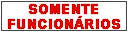
<style>
.page{position:relative;width:128px;height:32px;background:#ffffff}
.page>*{position:absolute;margin:0}
.t1{font:14.2px/15px "Arial-BoldMT";letter-spacing:-0.06em;font-weight:bold;scale:0.91 1}
.t2{font:14.2px/15px "Arial-BoldMT";letter-spacing:-0.02em;font-weight:bold;scale:0.91 1}
.t3{font:14.2px/15px "Arial-BoldMT";letter-spacing:-0.12em;font-weight:bold;scale:0.91 1}
.t4{font:14.2px/15px "Arial-BoldMT";letter-spacing:-0.14em;font-weight:bold;scale:0.91 1}
.t5{font:14.2px/15px "Arial-BoldMT";letter-spacing:-0.16em;font-weight:bold;scale:0.91 1}
.t6{font:14.2px/15px "Arial-BoldMT";letter-spacing:0.06em;font-weight:bold;scale:0.91 1}
</style>
<div class="page">
<p class="t1" style="left:8px;top:4px;width:112px;height:25px">SO<span class="t2">M</span>E<span class="t3">N</span><span class="t2">T</span>E<br><span class="t4">F</span>U<span class="t5">N</span><span class="t3">C</span>IO<span class="t4">N</span><span class="t6">Á</span>RI<span class="t3">O</span>S</p>
</div>
